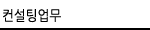
<style>
.page{position:relative;width:150px;height:30px;background:#ffffff}
.page>*{position:absolute;margin:0}
.t1{font:14px "NanumGothic";color:#000000;scale:0.9 1}
</style>
<div class="page">
<p class="t1" style="left:3px;top:9px;width:58px;height:14px">컨설팅업무</p>
</div>
